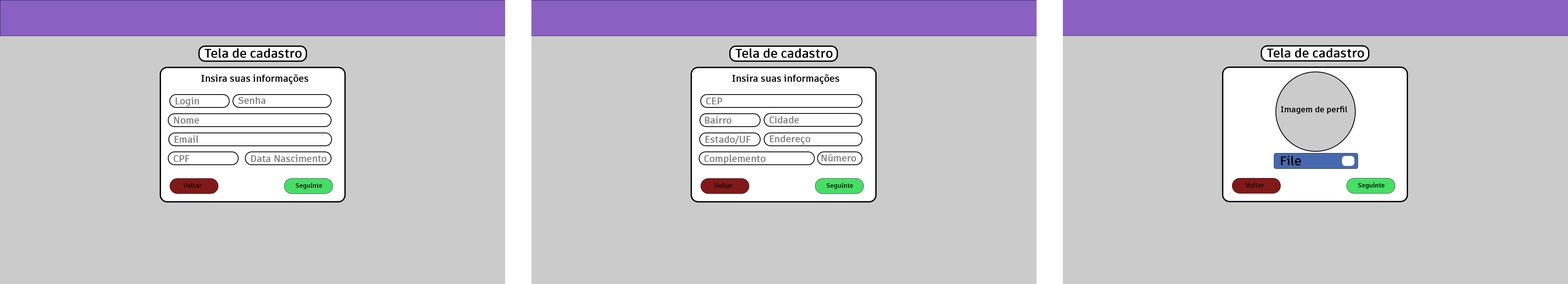
<style>
.page{position:relative;width:1568px;height:284px;background:#cbcbcb}
.page>*{position:absolute;margin:0}
.t1{font:12.6px "ArtifaktElement-Bold";color:#000000}
.t2{font:9.5px "ArtifaktElement-Bold";color:#000000}
.t3{font:9.5px "ArtifaktElement-Bold";color:#7f7f7f}
.t4{font:8.1px "ArtifaktElement-Bold";color:#000000}
.t5{font:6.3px "ArtifaktElement-Bold";color:#000000}
</style>
<div class="page">
<p class="t1" style="left:204px;top:48px;width:98px;height:10px">Tela de cadastro</p>
<p class="t1" style="left:735px;top:48px;width:98px;height:10px">Tela de cadastro</p>
<p class="t1" style="left:1267px;top:48px;width:97px;height:10px">Tela de cadastro</p>
<p class="t2" style="left:201px;top:74px;width:107px;height:10px">Insira suas informações</p>
<p class="t2" style="left:732px;top:74px;width:107px;height:10px">Insira suas informações</p>
<p class="t3" style="left:175px;top:97px;width:24px;height:9px">Login</p>
<p class="t3" style="left:238px;top:97px;width:27px;height:7px">Senha</p>
<p class="t3" style="left:706px;top:98px;width:16px;height:6px">CEP</p>
<p class="t4" style="left:1281px;top:106px;width:66px;height:8px">Imagem de perfil</p>
<p class="t3" style="left:174px;top:117px;width:25px;height:7px">Nome</p>
<p class="t3" style="left:705px;top:116px;width:26px;height:8px">Bairro</p>
<p class="t3" style="left:770px;top:116px;width:29px;height:7px">Cidade</p>
<p class="t3" style="left:174px;top:135px;width:24px;height:8px">Email</p>
<p class="t3" style="left:705px;top:135px;width:46px;height:10px">Estado/UF</p>
<p class="t3" style="left:770px;top:135px;width:40px;height:10px">Endereço</p>
<p class="t3" style="left:174px;top:155px;width:15px;height:7px">CPF</p>
<p class="t3" style="left:251px;top:155px;width:75px;height:7px">Data Nascimento</p>
<p class="t3" style="left:704px;top:155px;width:62px;height:9px">Complemento</p>
<p class="t3" style="left:821px;top:154px;width:35px;height:8px">Número</p>
<p class="t1" style="left:1281px;top:156px;width:20px;height:9px">File</p>
<p class="t5" style="left:183px;top:183px;width:19px;height:5px">Voltar</p>
<p class="t5" style="left:295px;top:183px;width:27px;height:6px">Seguinte</p>
<p class="t5" style="left:714px;top:183px;width:19px;height:5px">Voltar</p>
<p class="t5" style="left:826px;top:183px;width:27px;height:6px">Seguinte</p>
<p class="t5" style="left:1246px;top:183px;width:18px;height:5px">Voltar</p>
<p class="t5" style="left:1358px;top:183px;width:27px;height:6px">Seguinte</p>
</div>
